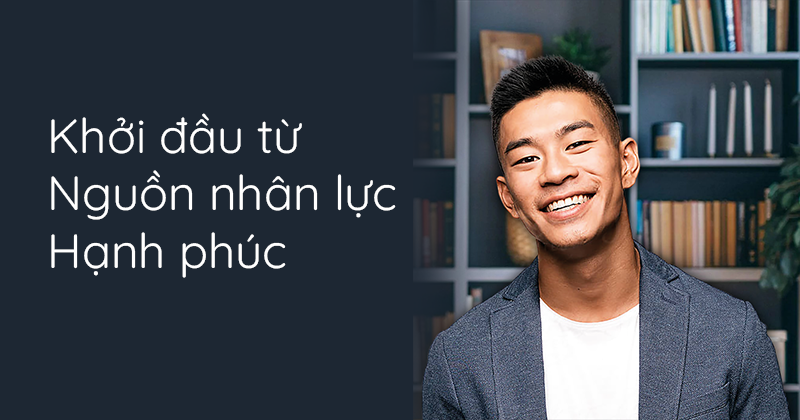
<style>
.page{position:relative;width:800px;height:420px;background:#1d2733}
.page>*{position:absolute;margin:0}
.t1{font:48px "Quicksand-Regular";color:#ffffff}
</style>
<div class="page">
<p class="t1" style="left:51px;top:113px;width:345px;height:165px">Khởi đầu từ Nguồn nhân lực Hạnh phúc</p>
</div>
